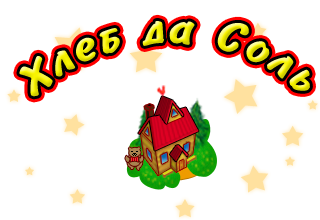
<style>
.page{position:relative;width:320px;height:220px;background:#ffffff}
.page>*{position:absolute;margin:0}
.t1{font:48px "BrushType-Bold";letter-spacing:0.075em;font-style:italic}
</style>
<div class="page">
<p class="t1" style="left:19px;top:21px;width:291px;height:76px">Õëåá äà Ñîëü</p>
</div>
